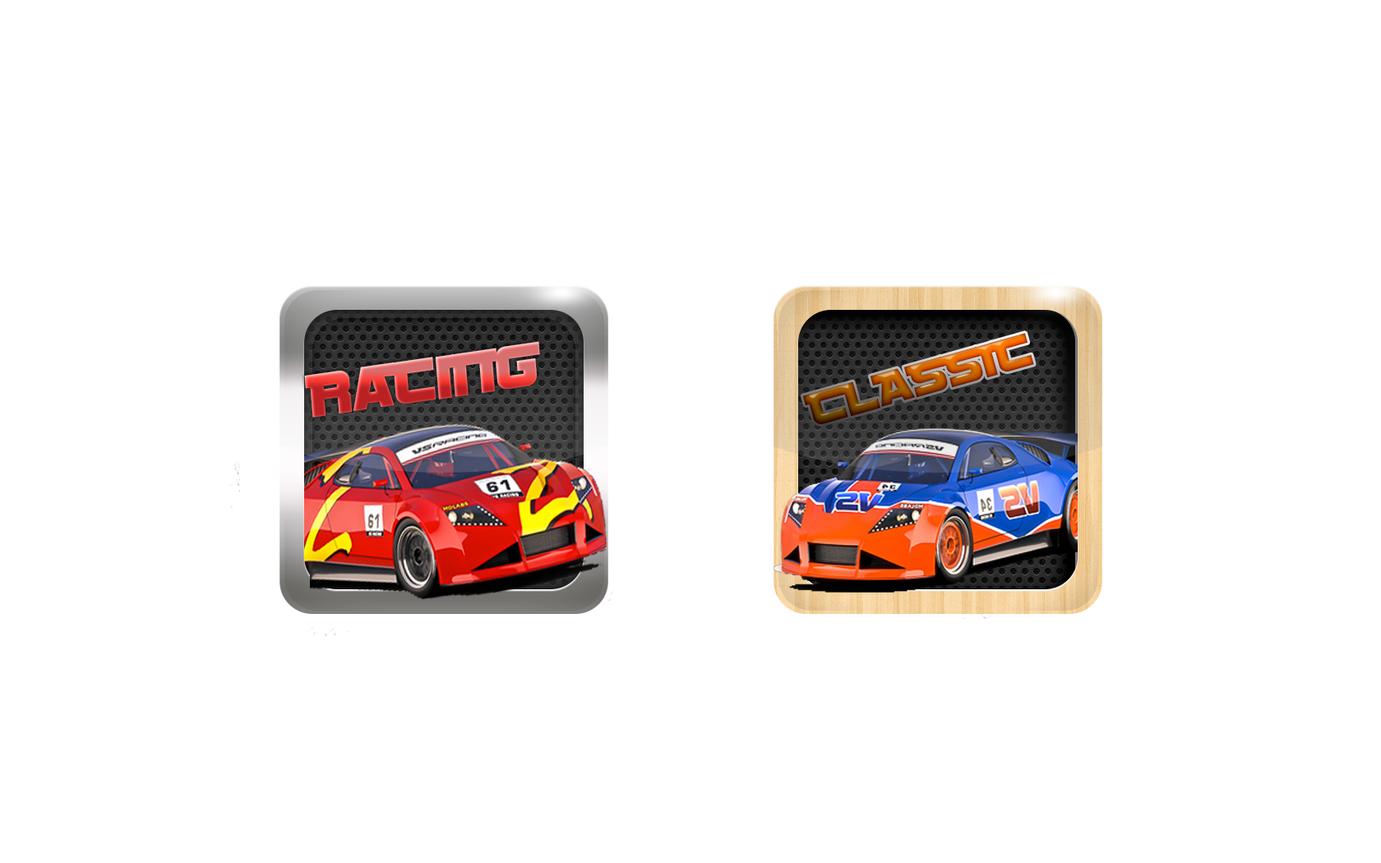
<style>
.page{position:relative;width:1381px;height:863px;background:#ffffff}
.page>*{position:absolute;margin:0}
.t1{font:63.6px "SFSportsNightNSAltUpright"}
.t2{font:48.7px "SFSportsNightNSAltUpright";scale:1.13 1}
</style>
<div class="page">
<p class="t1" style="left:304px;top:341px;width:236px;height:77px;rotate:-8deg">RaCing</p>
<p class="t2" style="left:802px;top:333px;width:232px;height:91px;rotate:-16deg">CLASSIC</p>
</div>
